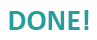
<style>
.page{position:relative;width:97px;height:40px;background:#ffffff}
.page>*{position:absolute;margin:0}
.t1{font:30px "Calibri-Bold";color:#239e9e}
</style>
<div class="page">
<p class="t1" style="left:9px;top:10px;width:80px;height:20px">DONE!</p>
</div>
